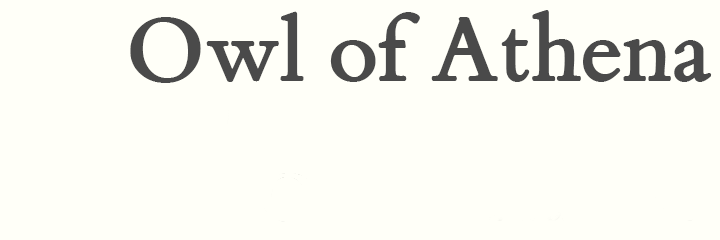
<style>
.page{position:relative;width:720px;height:240px;background:#fffff8}
.page>*{position:absolute;margin:0}
.t1{font:96px "ETBembo-BoldLF";color:#4a4a4a}
</style>
<div class="page">
<p class="t1" style="left:130px;top:10px;width:582px;height:73px">Owl of Athena</p>
</div>
